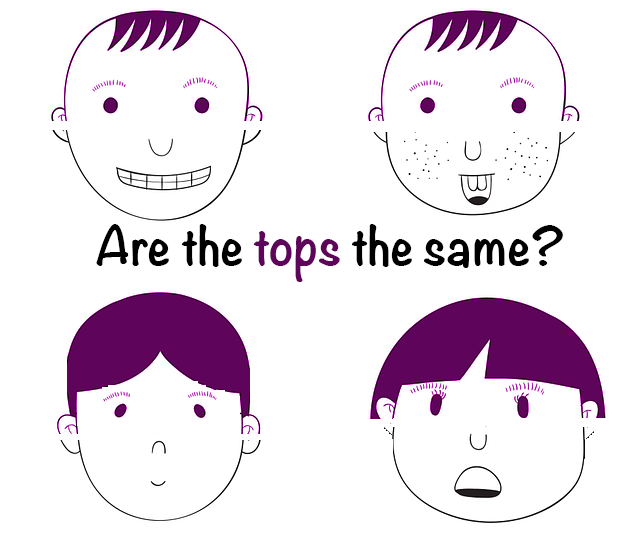
<style>
.page{position:relative;width:644px;height:539px;background:#ffffff}
.page>*{position:absolute;margin:0}
.t1{font:48px "Noteworthy-Bold";color:#000000}
.t2{font:48px "Noteworthy-Bold";color:#5e045a}
</style>
<div class="page">
<p class="t1" style="left:96px;top:224px;width:467px;height:58px">Are the <span class="t2">tops</span> the same?</p>
</div>
